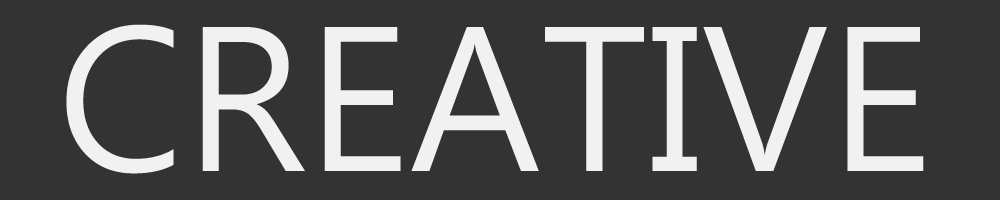
<style>
.page{position:relative;width:1000px;height:200px;background:#333333}
.page>*{position:absolute;margin:0}
.t1{font:200px "MalgunGothicRegular";color:#f1f1f1}
</style>
<div class="page">
<p class="t1" style="left:66px;top:24px;width:858px;height:150px">CREATIVE</p>
</div>
